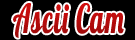
<style>
.page{position:relative;width:135px;height:40px;background:#000000}
.page>*{position:absolute;margin:0}
.t1{font:40px "Lobster1.4";letter-spacing:0.05em;color:#b50c0c;scale:0.65 1}
</style>
<div class="page">
<p class="t1" style="left:13px;top:3px;width:111px;height:35px">Ascii Cam</p>
</div>
